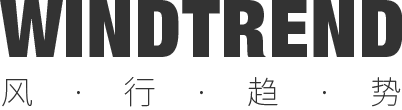
<style>
.page{position:relative;width:402px;height:110px;background:#ffffff}
.page>*{position:absolute;margin:0}
.t1{font:80px "HelveticaNeue-ExtBlackCond";letter-spacing:0.02em;color:#333333}
.t2{font:32px "SourceHanSansCN-ExtraLight";letter-spacing:1.16em;color:#333333}
</style>
<div class="page">
<p class="t1" style="left:0px;top:0px;width:403px;height:57px">WINDTREND</p>
<p class="t2" style="left:2px;top:77px;width:399px;height:30px">风·行·趋·势</p>
</div>
